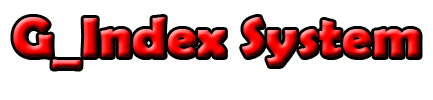
<style>
.page{position:relative;width:433px;height:100px;background:#ffffff}
.page>*{position:absolute;margin:0}
.t1{font:56.1px "BerlinSansFBDemi-Bold";font-weight:bold}
</style>
<div class="page">
<p class="t1" style="left:13px;top:17px;width:407px;height:52px">G_Index System</p>
</div>
